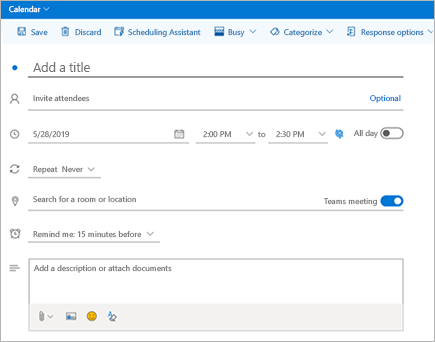
<style>
.page{position:relative;width:435px;height:342px;background:#ffffff}
.page>*{position:absolute;margin:0}
.t1{font:8px "SegoeUI";color:#ffffff}
.t2{font:8px "SegoeUI"}
.t3{font:8px "SegoeUI";color:#2f79b7}
.t4{font:12.5px "SegoeUI";color:#757575}
.t5{font:8px "SegoeUI";color:#757575}
</style>
<div class="page">
<p class="t1" style="left:9px;top:5px;width:32px;height:8px">Calendar</p>
<p class="t2" style="left:31px;top:29px;width:17px;height:7px">Save</p>
<p class="t3" style="left:75px;top:28px;width:26px;height:8px">Discard</p>
<p class="t3" style="left:128px;top:28px;width:73px;height:9px">Scheduling Assistant</p>
<p class="t2" style="left:228px;top:29px;width:17px;height:8px">Busy</p>
<p class="t2" style="left:284px;top:29px;width:38px;height:8px">Categorize</p>
<p class="t2" style="left:361px;top:29px;width:63px;height:8px">Response options</p>
<p class="t4" style="left:33px;top:62px;width:57px;height:10px">Add a title</p>
<p class="t5" style="left:33px;top:94px;width:57px;height:8px">Invite attendees</p>
<p class="t2" style="left:370px;top:94px;width:31px;height:9px">Optional</p>
<p class="t5" style="left:33px;top:131px;width:37px;height:8px">5/28/2019</p>
<p class="t5" style="left:203px;top:131px;width:28px;height:7px">2:00 PM</p>
<p class="t2" style="left:258px;top:131px;width:8px;height:7px">to</p>
<p class="t5" style="left:276px;top:131px;width:28px;height:7px">2:30 PM</p>
<p class="t5" style="left:354px;top:129px;width:24px;height:9px">All day</p>
<p class="t5" style="left:33px;top:166px;width:50px;height:8px">Repeat  Never</p>
<p class="t5" style="left:33px;top:195px;width:103px;height:8px">Search for a room or location</p>
<p class="t5" style="left:324px;top:198px;width:53px;height:8px">Teams meeting</p>
<p class="t5" style="left:33px;top:230px;width:109px;height:8px">Remind me: 15 minutes before</p>
<p class="t5" style="left:34px;top:264px;width:138px;height:9px">Add a description or attach documents</p>
</div>
